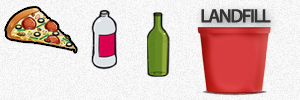
<style>
.page{position:relative;width:300px;height:100px;background:#fafafa}
.page>*{position:absolute;margin:0}
.t1{font:19.1px "MyriadPro-Semibold";letter-spacing:-0.08em;color:#333333}
</style>
<div class="page">
<p class="t1" style="left:201px;top:9px;width:70px;height:14px">LANDFILL</p>
</div>
